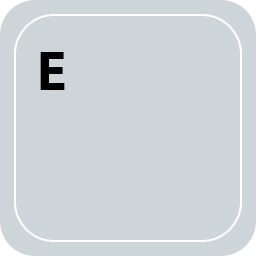
<style>
.page{position:relative;width:256px;height:256px;background:#cdd5d9}
.page>*{position:absolute;margin:0}
.t1{font:56px "MyriadPro-Bold";color:#000000}
</style>
<div class="page">
<p class="t1" style="left:40px;top:52px;width:25px;height:38px">E</p>
</div>
